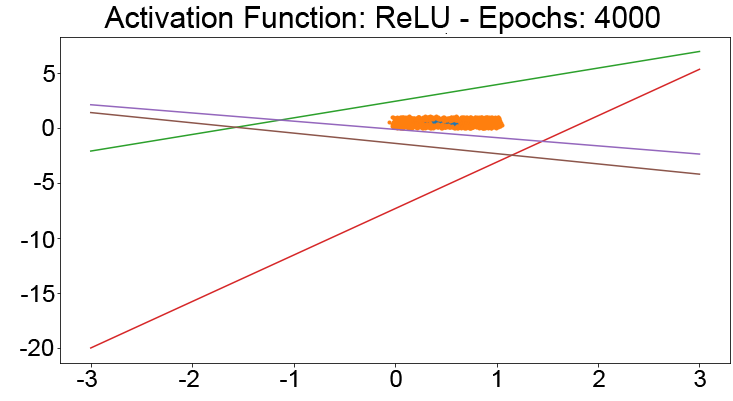
<style>
.page{position:relative;width:733px;height:401px;background:#ffffff}
.page>*{position:absolute;margin:0}
.t1{font:30px "ArialMT";color:#000000}
.t2{font:24px "ArialMT";color:#000000}
</style>
<div class="page">
<p class="t1" style="left:104px;top:6px;width:556px;height:28px">Activation Function: ReLU - Epochs: 4000</p>
<p class="t2" style="left:43px;top:65px;width:12px;height:17px">5</p>
<p class="t2" style="left:42px;top:119px;width:12px;height:17px">0</p>
<p class="t2" style="left:34px;top:173px;width:20px;height:17px">-5</p>
<p class="t2" style="left:21px;top:231px;width:34px;height:17px">-10</p>
<p class="t2" style="left:21px;top:285px;width:34px;height:17px">-15</p>
<p class="t2" style="left:20px;top:339px;width:34px;height:17px">-20</p>
<p class="t2" style="left:77px;top:370px;width:20px;height:17px">-3</p>
<p class="t2" style="left:179px;top:370px;width:20px;height:17px">-2</p>
<p class="t2" style="left:280px;top:370px;width:17px;height:17px">-1</p>
<p class="t2" style="left:390px;top:370px;width:12px;height:17px">0</p>
<p class="t2" style="left:493px;top:370px;width:7px;height:17px">1</p>
<p class="t2" style="left:593px;top:370px;width:12px;height:17px">2</p>
<p class="t2" style="left:694px;top:370px;width:12px;height:17px">3</p>
</div>
